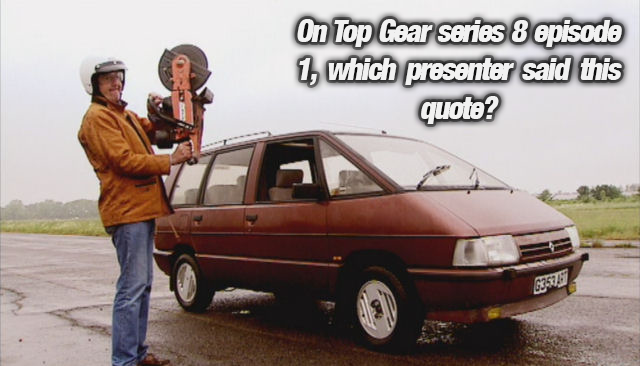
<style>
.page{position:relative;width:640px;height:366px}
.page>*{position:absolute;margin:0}
.t1{font:31.4px "HelveticaNeue-CondensedBlack";letter-spacing:-0.05em;color:#f1f1f1;font-style:italic;scale:0.95 1}
</style>
<div class="page">
<p class="t1" style="left:297px;top:19px;width:325px;height:105px;text-align:justify">On Top Gear series 8 episode 1, which presenter said this quote?</p>
</div>
